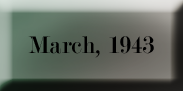
<style>
.page{position:relative;width:183px;height:91px}
.page>*{position:absolute;margin:0}
.t1{font:25.4px "Modern-Regular";color:#000000}
</style>
<div class="page">
<p class="t1" style="left:28px;top:36px;width:126px;height:22px">March, 1943</p>
</div>
